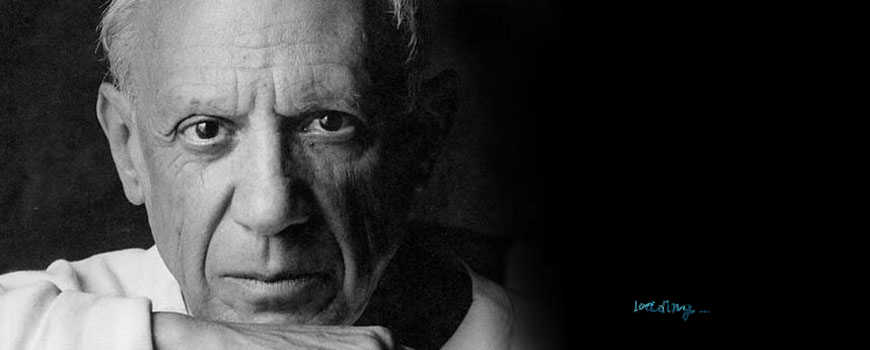
<style>
.page{position:relative;width:870px;height:350px;background:#010101}
.page>*{position:absolute;margin:0}
.t1{font:18.8px "LeviBrush"}
</style>
<div class="page">
<p class="t1" style="left:633px;top:300px;width:77px;height:22px">loading ...</p>
</div>
